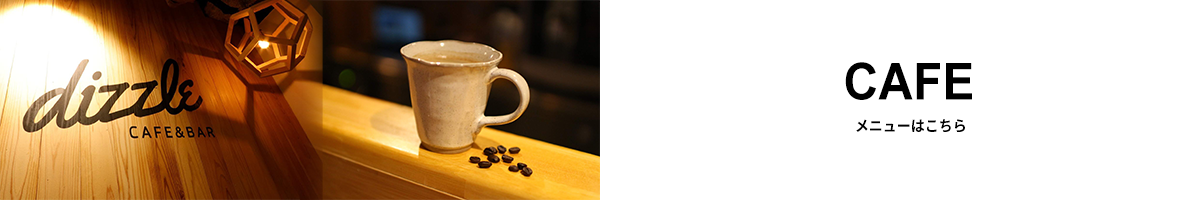
<style>
.page{position:relative;width:1200px;height:200px;background:#ffffff}
.page>*{position:absolute;margin:0}
.t1{font:50.9px "Arial-BoldMT";color:#000000;scale:0.94 1}
.t2{font:14.8px "SourceHanSans-Bold";color:#000000;scale:0.94 1}
</style>
<div class="page">
<p class="t1" style="left:845px;top:62px;width:127px;height:38px">CAFE</p>
<p class="t2" style="left:856px;top:119px;width:109px;height:13px">メニューはこちら</p>
</div>
